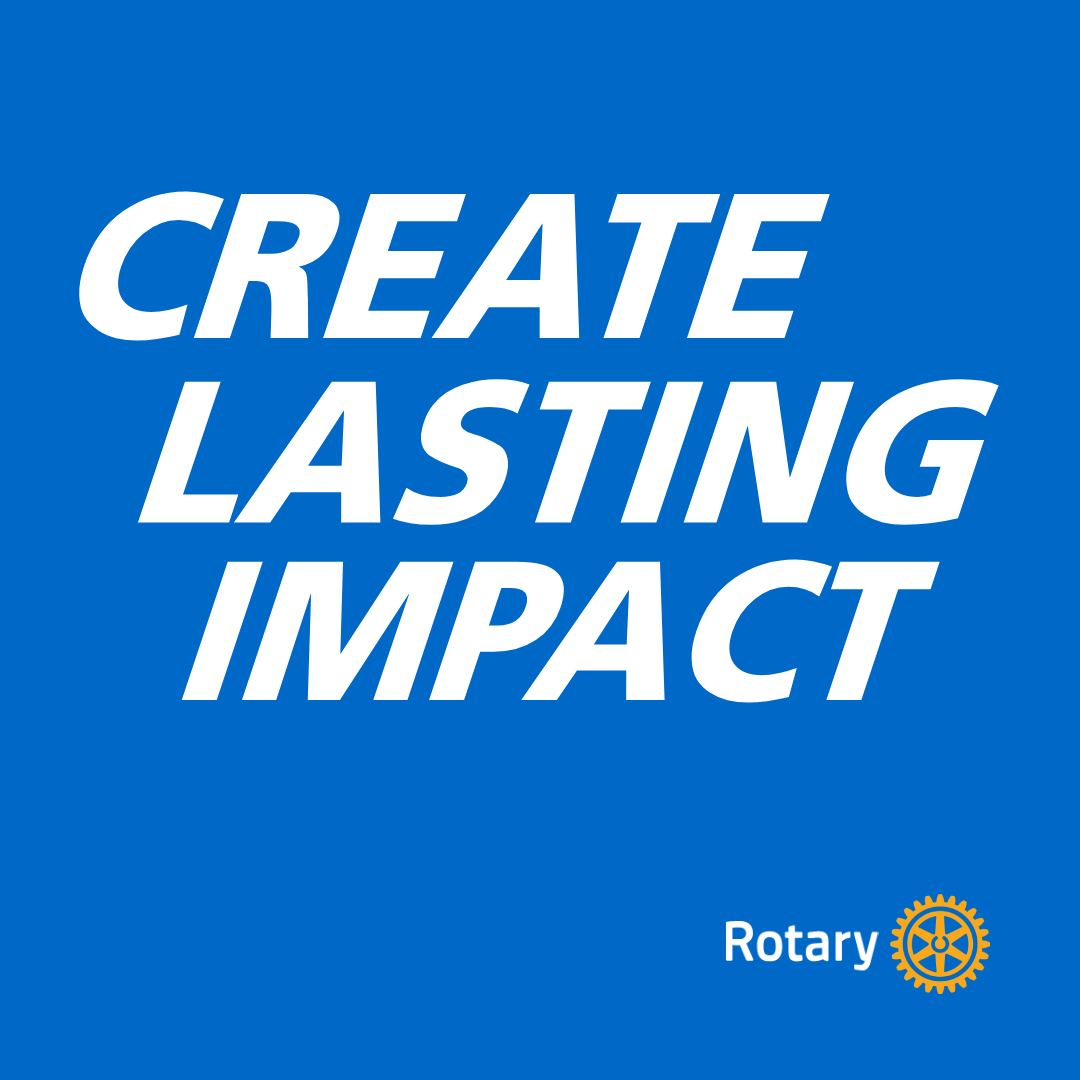
<style>
.page{position:relative;width:1080px;height:1080px;background:#0069c8}
.page>*{position:absolute;margin:0}
.t1{font:217.3px "FrutigerLTStd-Black";color:#ffffff;scale:0.89 1}
.t2{font:212.6px "FrutigerLTStd-Black";color:#ffffff;scale:0.9 1}
.t3{font:208.8px "FrutigerLTStd-Black";color:#ffffff;scale:0.9 1}
</style>
<div class="page">
<p class="t1" style="left:79px;top:191px;width:751px;height:150px">CREATE</p>
<p class="t2" style="left:138px;top:379px;width:861px;height:146px">LASTING</p>
<p class="t3" style="left:181px;top:559px;width:759px;height:144px">IMPACT</p>
</div>
